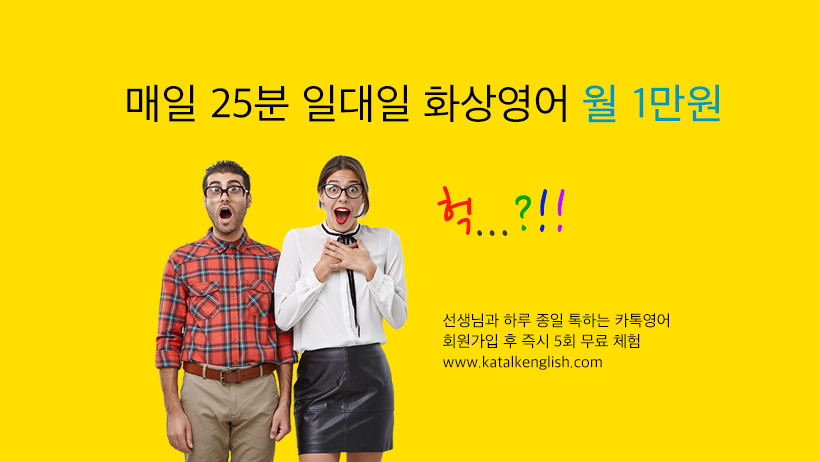
<style>
.page{position:relative;width:820px;height:462px;background:#ffde00}
.page>*{position:absolute;margin:0}
.t1{font:42.6px "AppleSDGothicNeo-Regular";color:#000000}
.t2{font:42.6px "AppleSDGothicNeo-Regular";color:#009bb2;font-weight:bold}
.t3{font:63.4px "NanumPenOTF";color:#383838}
.t4{font:63.4px "NanumPenOTF";color:#ff1800}
.t5{font:63.4px "NanumPenOTF";color:#00a708}
.t6{font:63.4px "NanumPenOTF";color:#0023d3}
.t7{font:63.4px "NanumPenOTF";color:#be0eff}
.t8{font:16.3px/20.8px "AppleSDGothicNeo-Regular";color:#000000}
</style>
<div class="page">
<p class="t1" style="left:127px;top:84px;width:593px;height:39px">매일 25분 일대일 화상영어 <span class="t2">월 1만원</span></p>
<p class="t3" style="left:437px;top:186px;width:128px;height:50px"><span class="t4">헉</span>...<span class="t5">?</span><span class="t6">!</span><span class="t7">!</span></p>
<p class="t8" style="left:443px;top:313px;width:226px;height:57px">선생님과 하루 종일 톡하는 카톡영어<br>회원가입 후 즉시 5회 무료 체험<br>www.katalkenglish.com</p>
</div>
